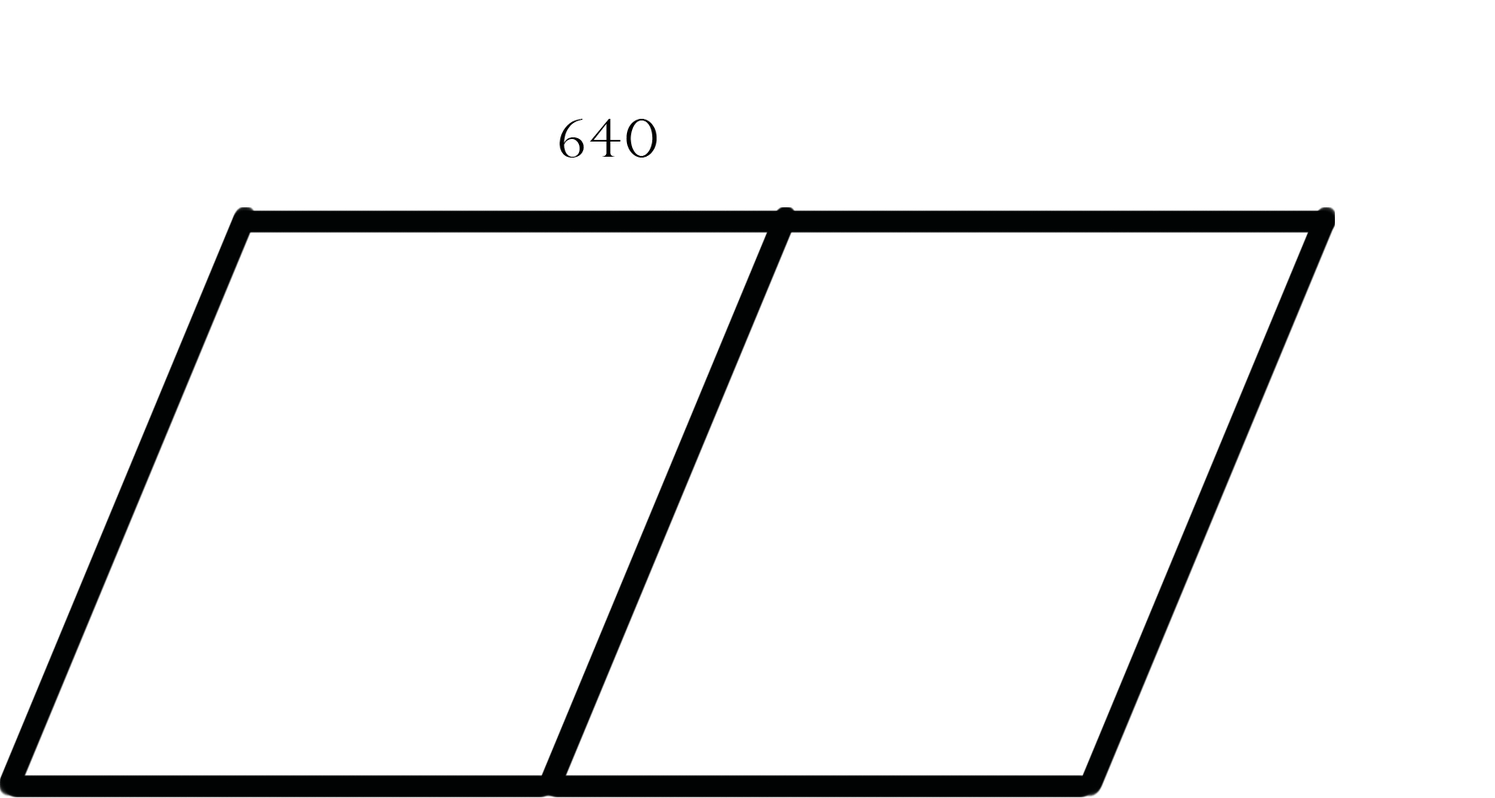
<style>
.page{position:relative;width:1495px;height:798px;background:#ffffff}
.page>*{position:absolute;margin:0}
.t1{font:51.1px "PerpetuaTitlingMT-Light";letter-spacing:0.06em;color:#000000}
</style>
<div class="page">
<p class="t1" style="left:559px;top:119px;width:98px;height:39px">640</p>
</div>
